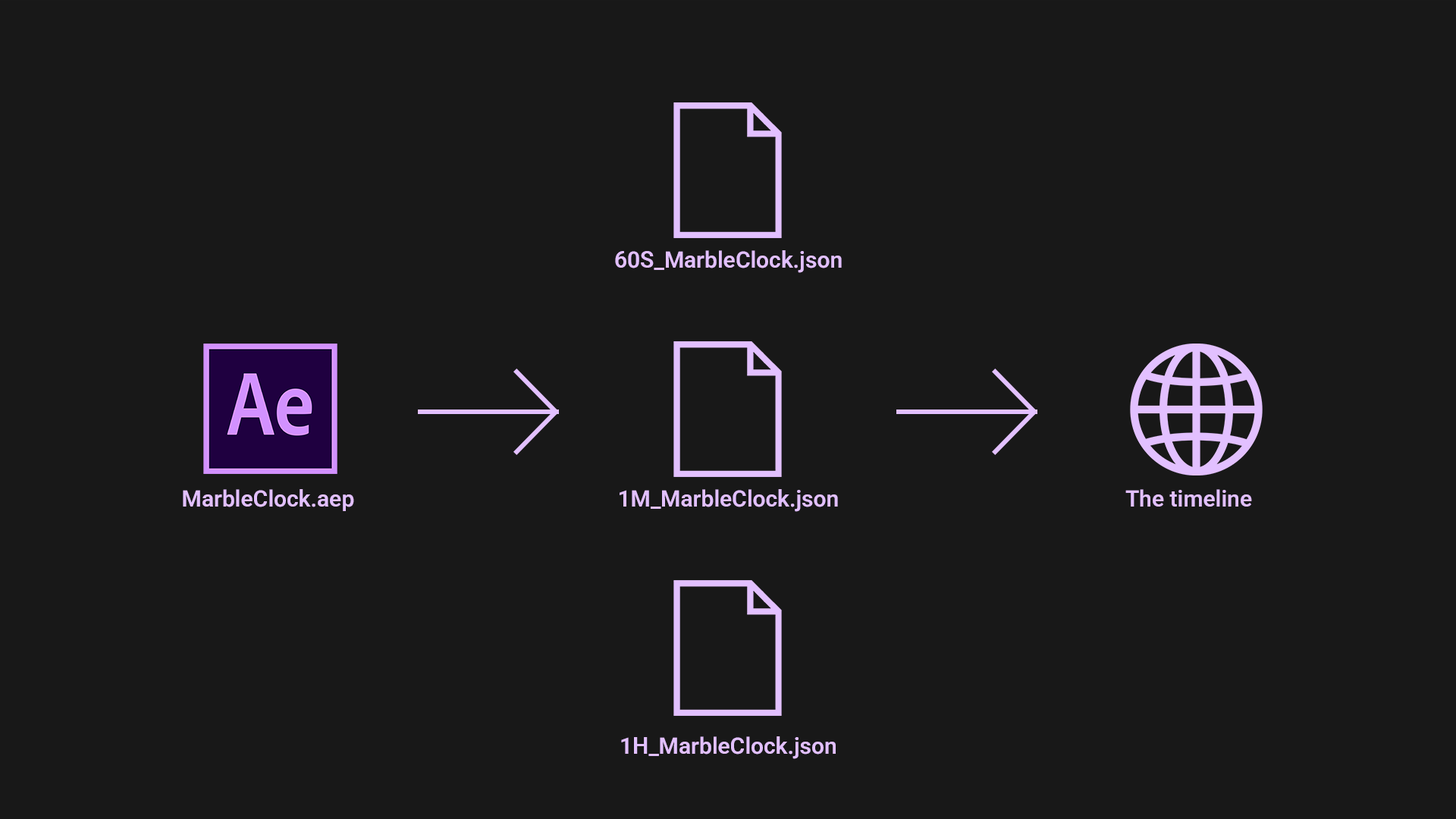
<style>
.page{position:relative;width:1456px;height:819px;background:#181818}
.page>*{position:absolute;margin:0}
.t1{font:22.7px "Roboto-SemiBold";color:#e2c0ff}
</style>
<div class="page">
<p class="t1" style="left:615px;top:250px;width:227px;height:23px">60S_MarbleClock.json</p>
<p class="t1" style="left:183px;top:489px;width:171px;height:22px">MarbleClock.aep</p>
<p class="t1" style="left:620px;top:489px;width:218px;height:23px">1M_MarbleClock.json</p>
<p class="t1" style="left:1125px;top:489px;width:127px;height:18px">The timeline</p>
<p class="t1" style="left:621px;top:736px;width:215px;height:23px">1H_MarbleClock.json</p>
</div>
